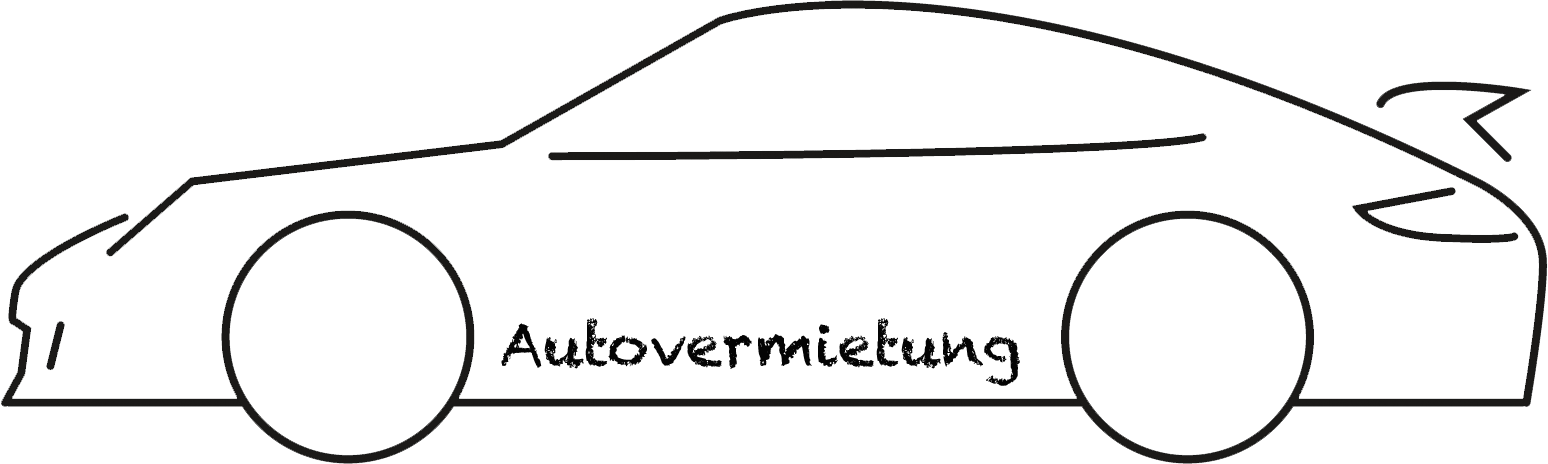
<style>
.page{position:relative;width:1548px;height:464px;background:#ffffff}
.page>*{position:absolute;margin:0}
.t1{font:58.3px "Chalkduster";color:#040404}
</style>
<div class="page">
<p class="t1" style="left:501px;top:318px;width:519px;height:68px">Autovermietung</p>
</div>
